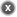
<style>
.page{position:relative;width:17px;height:17px;background:#ffffff}
.page>*{position:absolute;margin:0}
.t1{font:11px "Helvetica-Bold";color:#ffffff}
</style>
<div class="page">
<p class="t1" style="left:5px;top:5px;width:6px;height:6px">x</p>
</div>
